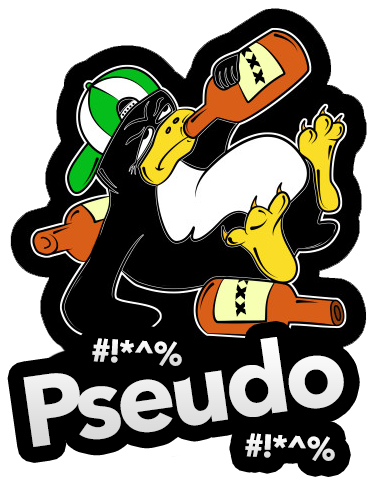
<style>
.page{position:relative;width:376px;height:485px;background:#000000}
.page>*{position:absolute;margin:0}
.t1{font:17.6px "AvenirNext-Heavy";letter-spacing:0.075em;color:#000000}
.t2{font:98.8px "AvenirNext-Bold";letter-spacing:-0.05em;color:#e9e9e9}
.t3{font:32.1px "AvenirNext-Bold";letter-spacing:-0.05em;color:#ffffff}
</style>
<div class="page">
<p class="t1" style="left:235px;top:40px;width:31px;height:45px;rotate:-119deg">xxx</p>
<p class="t1" style="left:235px;top:268px;width:18px;height:49px;rotate:98deg">xxx</p>
<p class="t2" style="left:23px;top:337px;width:321px;height:110px;rotate:-8deg">Pseudo</p>
<p class="t3" style="left:92px;top:338px;width:90px;height:28px;rotate:3deg">#!*^%</p>
<p class="t3" style="left:245px;top:433px;width:90px;height:28px;rotate:3deg">#!*^%</p>
</div>
